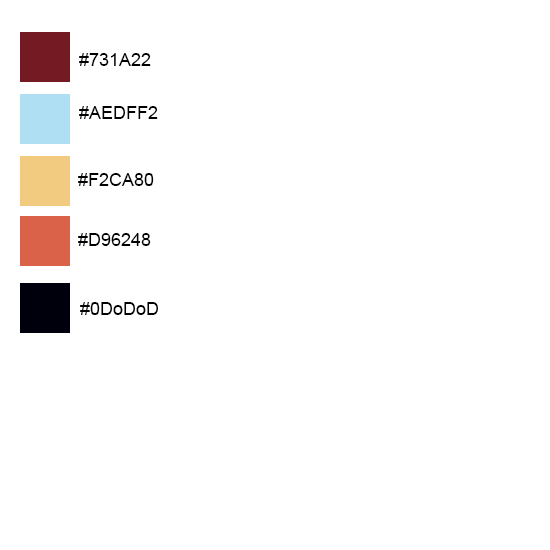
<style>
.page{position:relative;width:550px;height:550px;background:#ffffff}
.page>*{position:absolute;margin:0}
.t1{font:18px "ArialMT";color:#000000}
</style>
<div class="page">
<p class="t1" style="left:79px;top:53px;width:72px;height:13px">#731A22</p>
<p class="t1" style="left:79px;top:106px;width:79px;height:13px">#AEDFF2</p>
<p class="t1" style="left:78px;top:173px;width:76px;height:13px">#F2CA80</p>
<p class="t1" style="left:78px;top:233px;width:73px;height:13px">#D96248</p>
<p class="t1" style="left:80px;top:302px;width:79px;height:13px">#0DoDoD</p>
</div>
